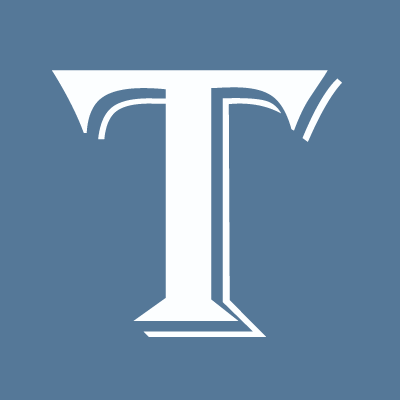
<style>
.page{position:relative;width:400px;height:400px;background:#557898}
.page>*{position:absolute;margin:0}
.t1{font:400px "Algerian";color:#fcfeff;scale:1.17 1}
</style>
<div class="page">
<p class="t1" style="left:52px;top:70px;width:290px;height:267px">T</p>
</div>
